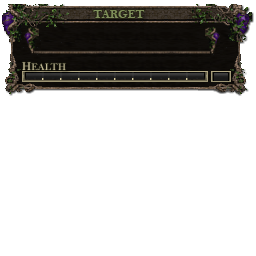
<style>
.page{position:relative;width:256px;height:256px;background:#ffffff}
.page>*{position:absolute;margin:0}
.t1{font:12px "BellMTBold";color:#7f8e5a}
.t2{font:10px "BellMTBold";color:#bcb390}
.t3{font:12px "BellMTBold";color:#bcb390}
</style>
<div class="page">
<p class="t1" style="left:93px;top:10px;width:52px;height:8px">TARGET</p>
<p class="t2" style="left:22px;top:62px;width:44px;height:8px"><span class="t3">H</span>EALTH</p>
</div>
